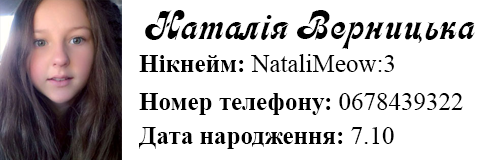
<style>
.page{position:relative;width:480px;height:160px;background:#ffffff}
.page>*{position:absolute;margin:0}
.t1{font:41.7px "Asessor";color:#000000}
.t2{font:25px "TimesNewRomanPSMT";color:#000000}
.t3{font:25px "TimesNewRomanPS-BoldMT";color:#000000}
</style>
<div class="page">
<p class="t1" style="left:145px;top:10px;width:330px;height:39px">Наталія Верницька</p>
<p class="t2" style="left:139px;top:54px;width:255px;height:19px"><span class="t3">Нікнейм: </span>NataliMeow:3</p>
<p class="t3" style="left:139px;top:93px;width:324px;height:22px">Номер телефону: <span class="t2">0678439322</span></p>
<p class="t3" style="left:139px;top:127px;width:255px;height:22px">Дата народження: <span class="t2">7.10</span></p>
</div>
